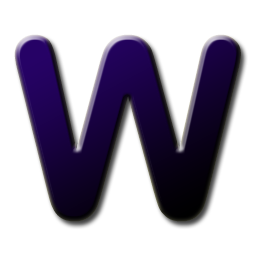
<style>
.page{position:relative;width:256px;height:256px;background:#ffffff}
.page>*{position:absolute;margin:0}
.t1{font:243px "ArialRoundedMTBold";font-weight:bold}
</style>
<div class="page">
<p class="t1" style="left:14px;top:34px;width:227px;height:188px">W</p>
</div>
